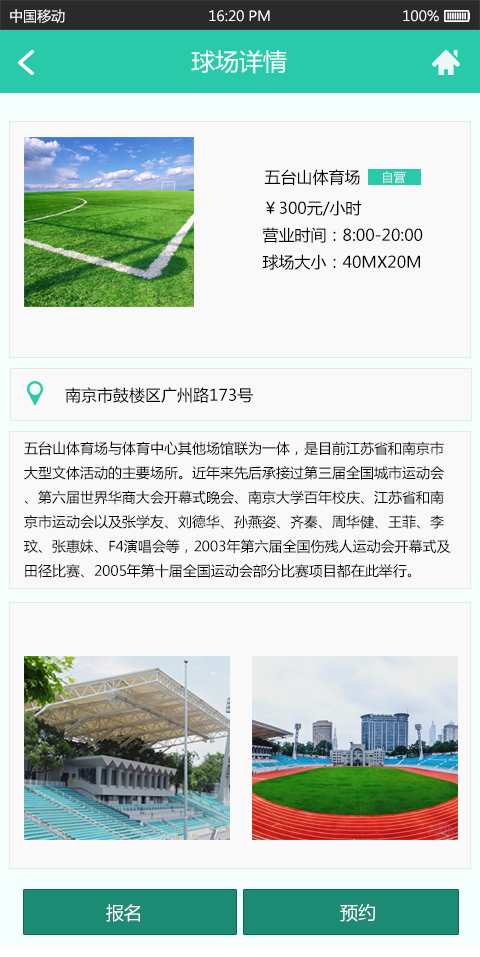
<style>
.page{position:relative;width:480px;height:957px;background:#f9f9f9}
.page>*{position:absolute;margin:0}
.t1{font:14px "MicrosoftYaHei";color:#ffffff}
.t2{font:24px "MicrosoftYaHei";color:#f4fffd}
.t3{font:16px "MicrosoftYaHei";color:#000000}
.t4{font:12px "MicrosoftYaHei";color:#ffffff}
.t5{font:14px "MicrosoftYaHei";color:#000000}
.t6{font:18px "MicrosoftYaHei";color:#ffffff}
</style>
<div class="page">
<p class="t1" style="left:10px;top:9px;width:55px;height:14px">中国移动</p>
<p class="t1" style="left:209px;top:10px;width:61px;height:12px">16:20 PM</p>
<p class="t1" style="left:403px;top:10px;width:36px;height:12px">100%</p>
<p class="t2" style="left:191px;top:50px;width:96px;height:24px">球场详情</p>
<p class="t3" style="left:264px;top:169px;width:96px;height:16px">五台山体育场</p>
<p class="t4" style="left:383px;top:171px;width:23px;height:12px">自营</p>
<p class="t3" style="left:266px;top:200px;width:96px;height:16px">￥300元/小时</p>
<p class="t3" style="left:262px;top:227px;width:161px;height:16px">营业时间：8:00-20:00</p>
<p class="t3" style="left:262px;top:254px;width:158px;height:16px">球场大小：40MX20M</p>
<p class="t3" style="left:65px;top:387px;width:188px;height:16px">南京市鼓楼区广州路173号</p>
<p class="t5" style="left:24px;top:441px;width:427px;height:137px">五台山体育场与体育中心其他场馆联为一体，是目前江苏省和南京市大型文体活动的主要场所。近年来先后承接过第三届全国城市运动会、第六届世界华商大会开幕式晚会、南京大学百年校庆、江苏省和南京市运动会以及张学友、刘德华、孙燕姿、齐秦、周华健、王菲、李玟、张惠妹、F4演唱会等，2003年第六届全国伤残人运动会开幕式及田径比赛、2005年第十届全国运动会部分比赛项目都在此举行。</p>
<p class="t6" style="left:106px;top:904px;width:34px;height:18px">报名</p>
<p class="t6" style="left:340px;top:903px;width:35px;height:19px">预约</p>
</div>
